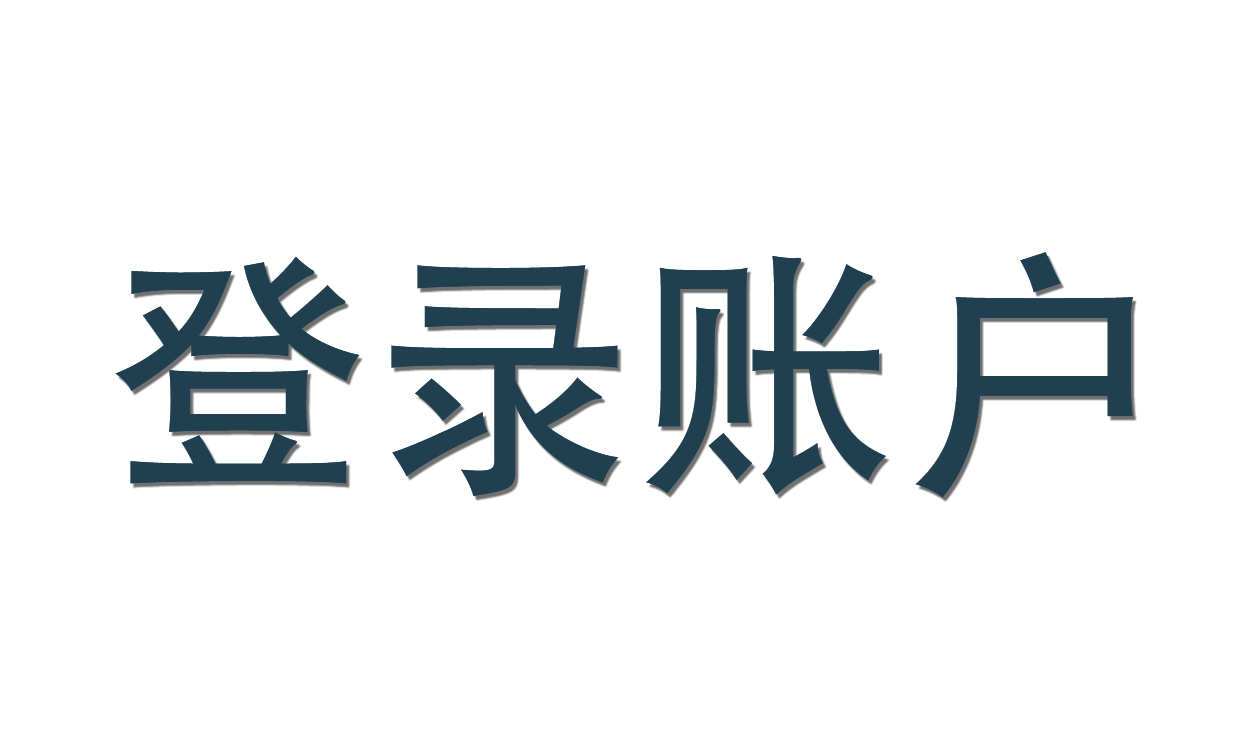
<style>
.page{position:relative;width:1250px;height:750px;background:#ffffff}
.page>*{position:absolute;margin:0}
.t1{font:264px "AdobeHeitiStd-Regular";color:#204051}
</style>
<div class="page">
<p class="t1" style="left:115px;top:252px;width:1018px;height:246px">登录账户</p>
</div>
